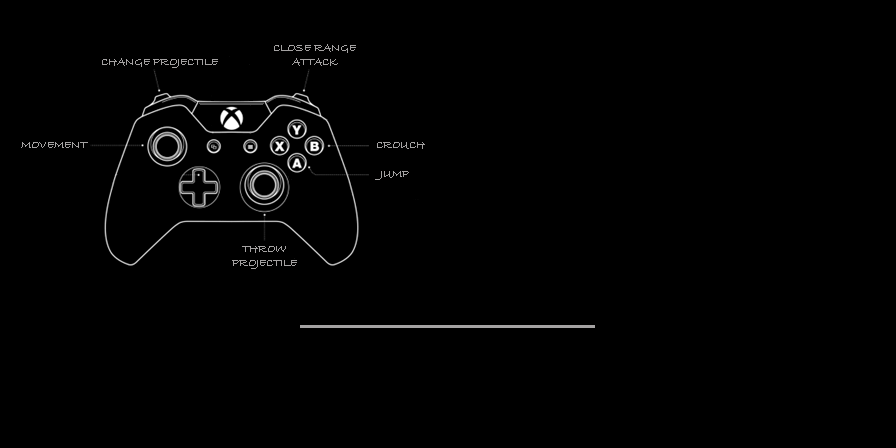
<style>
.page{position:relative;width:896px;height:448px;background:#000000}
.page>*{position:absolute;margin:0}
.t1{font:12px "BradleyHandITC";color:#a4a2a2}
</style>
<div class="page">
<p class="t1" style="left:274px;top:44px;width:82px;height:22px;text-align:center">CLOSE RANGE ATTACK</p>
<p class="t1" style="left:102px;top:58px;width:116px;height:10px">CHANGE PROJECTILE</p>
<p class="t1" style="left:21px;top:142px;width:67px;height:6px">MOVEMENT</p>
<p class="t1" style="left:377px;top:142px;width:48px;height:7px">CROUCH</p>
<p class="t1" style="left:232px;top:246px;width:65px;height:23px;text-align:center">THROW PROJECTILE</p>
</div>
